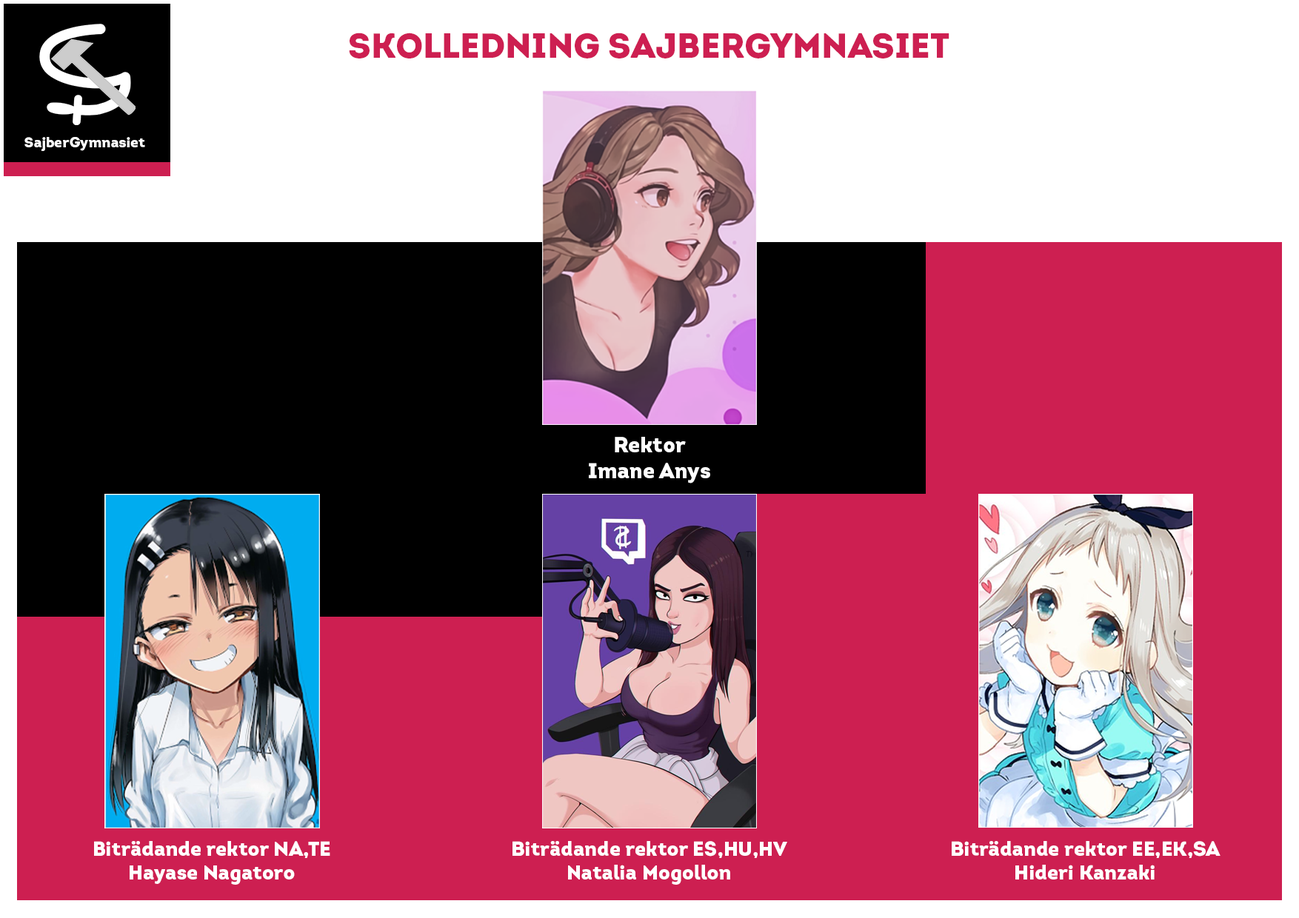
<style>
.page{position:relative;width:1299px;height:918px;background:#cd1f51}
.page>*{position:absolute;margin:0}
.t1{font:34.8px "Intro-Black";color:#cd1f51}
.t2{font:14.5px "Intro-Black";color:#ffffff}
.t3{font:21.8px "Intro-Black";color:#ffffff}
.t4{font:20.3px "Intro-Black";color:#ffffff}
</style>
<div class="page">
<p class="t1" style="left:349px;top:33px;width:600px;height:25px">SKOLLEDNING SAJBERGYMNASIET</p>
<p class="t2" style="left:24px;top:137px;width:121px;height:14px">SajberGymnasiet</p>
<p class="t3" style="left:589px;top:437px;width:121px;height:47px;text-align:center">Rektor<br>Imane Anys</p>
<p class="t4" style="left:94px;top:841px;width:236px;height:44px;text-align:center">Biträdande rektor NA,TE<br>Hayase Nagatoro</p>
<p class="t4" style="left:512px;top:841px;width:275px;height:44px;text-align:center">Biträdande rektor ES,HU,HV<br>Natalia Mogollon</p>
<p class="t4" style="left:951px;top:841px;width:269px;height:39px;text-align:center">Biträdande rektor EE,EK,SA<br>Hideri Kanzaki</p>
</div>
